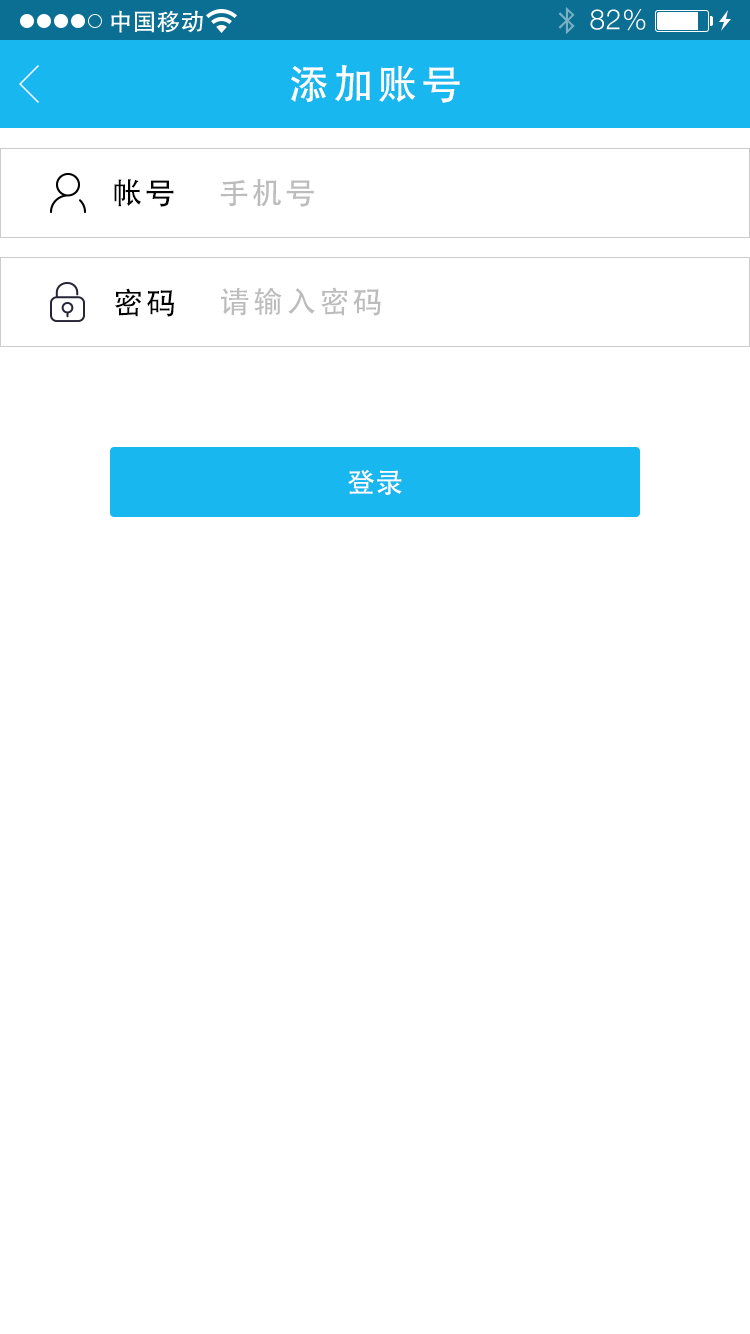
<style>
.page{position:relative;width:750px;height:1334px;background:#ffffff}
.page>*{position:absolute;margin:0}
.t1{font:40px "AdobeHeitiStd-Regular";letter-spacing:0.104em;color:#ffffff}
.t2{font:30px "AdobeHeitiStd-Regular";letter-spacing:0.104em;color:#000000}
.t3{font:30px "AdobeHeitiStd-Regular";letter-spacing:0.104em;color:#bcbcbc}
.t4{font:28px "AdobeHeitiStd-Regular";color:#ffffff}
</style>
<div class="page">
<p class="t1" style="left:291px;top:65px;width:169px;height:38px">添加账号</p>
<p class="t2" style="left:114px;top:179px;width:60px;height:28px">帐号</p>
<p class="t3" style="left:220px;top:179px;width:94px;height:28px">手机号</p>
<p class="t2" style="left:114px;top:288px;width:60px;height:29px">密码</p>
<p class="t3" style="left:221px;top:287px;width:160px;height:29px">请输入密码</p>
<p class="t4" style="left:348px;top:469px;width:54px;height:26px">登录</p>
</div>
